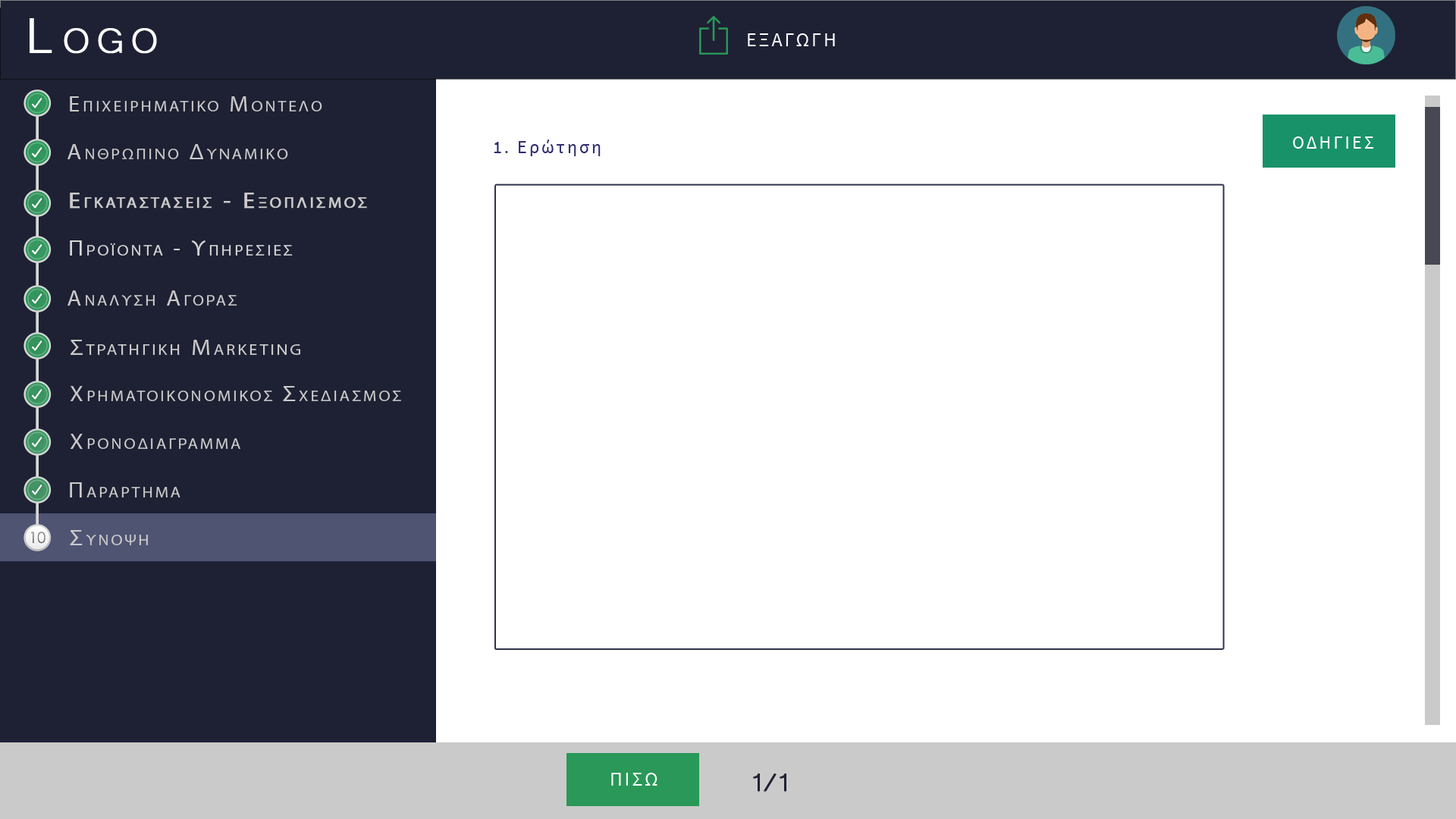
<style>
.page{position:relative;width:1456px;height:819px;background:#ffffff}
.page>*{position:absolute;margin:0}
.t1{font:63.7px "Microsoft-Yi-Baiti";letter-spacing:0.13em;color:#ffffff;font-variant:small-caps;font-weight:bold}
.t2{font:20px "SourceSansPro-Regular";letter-spacing:0.1em;color:#fefefe;text-transform:uppercase}
.t3{font:21.7px "MyriadPro-Regular";letter-spacing:0.13em;color:#cbcaca;font-variant:small-caps;scale:1.09 1}
.t4{font:23.4px "Microsoft-Yi-Baiti";letter-spacing:0.13em;color:#cbcaca;font-variant:small-caps;font-weight:bold}
.t5{font:18.2px "SourceSansPro-Regular";letter-spacing:0.13em;color:#ffffff;text-transform:uppercase}
.t6{font:18.2px "SourceSansPro-Regular";letter-spacing:0.13em;color:#2f2f70}
.t7{font:18.2px "SourceSansPro-Regular";letter-spacing:0.13em;color:#2f2f70;text-transform:uppercase}
.t8{font:21.7px/91px "MyriadPro-Regular";letter-spacing:0.13em;color:#cbcaca;font-variant:small-caps;font-weight:bold;scale:1.09 1}
.t9{font:23.4px/91px "Microsoft-Yi-Baiti";letter-spacing:0.13em;color:#cbcaca;font-variant:small-caps;font-weight:bold}
.t10{font:21.7px "MyriadPro-Regular";letter-spacing:0.13em;color:#d6d6d6;font-variant:small-caps;scale:1.09 1}
.t11{font:23.4px "Microsoft-Yi-Baiti";letter-spacing:0.13em;color:#d6d6d6;font-variant:small-caps;font-weight:bold}
.t12{font:22.2px "MyriadPro-Regular";letter-spacing:0.13em;color:#cbcaca;font-variant:small-caps;scale:1.09 1}
.t13{font:25.5px "Microsoft-Yi-Baiti";letter-spacing:0.13em;color:#cbcaca;font-variant:small-caps;font-weight:bold}
.t14{font:23.7px "Microsoft-Yi-Baiti";letter-spacing:0.13em;color:#cbcaca;font-variant:small-caps;scale:1.09 1}
.t15{font:15.3px "CenturyGothic";color:#878787}
.t16{font:32.8px "Microsoft-Yi-Baiti";letter-spacing:-0.1em;color:#1e2133;font-weight:bold}
</style>
<div class="page">
<p class="t1" style="left:30px;top:18px;width:127px;height:36px">Logo</p>
<p class="t2" style="left:748px;top:33px;width:87px;height:13px">εξαγωγη</p>
<p class="t3" style="left:70px;top:96px;width:252px;height:15px"><span class="t4">   </span>Επιχειρηματικο Μοντελο</p>
<p class="t5" style="left:1293px;top:136px;width:81px;height:13px">Οδηγιεσ</p>
<p class="t3" style="left:67px;top:144px;width:221px;height:15px"><span class="t4">   </span>Ανθρωπινο Δυναμικο</p>
<p class="t6" style="left:494px;top:140px;width:107px;height:16px"><span class="t7">1. </span>Ερώτηση</p>
<p class="t8" style="left:70px;top:193px;width:297px;height:16px"><span class="t9">   </span>Εγκαταστασεισ - Εξοπλισμοσ<br><br><span class="t9">Equipment</span></p>
<p class="t10" style="left:70px;top:240px;width:223px;height:16px"><span class="t11">   </span>Προϊοντα - Υπηρεσιεσ</p>
<p class="t3" style="left:67px;top:290px;width:170px;height:16px"><span class="t4">   </span>Αναλυση Αγορασ</p>
<p class="t12" style="left:71px;top:340px;width:229px;height:15px"><span class="t13">   </span>Στρατηγικη Marketing</p>
<p class="t3" style="left:70px;top:386px;width:331px;height:15px"><span class="t13">   </span>Χρηματοικονομικοσ Σχεδιασμοσ</p>
<p class="t3" style="left:70px;top:434px;width:170px;height:15px"><span class="t13">   </span>Χρονοδιαγραμμα</p>
<p class="t3" style="left:70px;top:482px;width:110px;height:15px"><span class="t14">   </span>Παραρτημα</p>
<p class="t15" style="left:30px;top:532px;width:15px;height:12px">10</p>
<p class="t3" style="left:70px;top:530px;width:78px;height:15px"><span class="t14">   </span>Συνοψη</p>
<p class="t2" style="left:611px;top:773px;width:46px;height:13px">Πισω</p>
<p class="t16" style="left:753px;top:773px;width:33px;height:19px">1/1</p>
</div>
